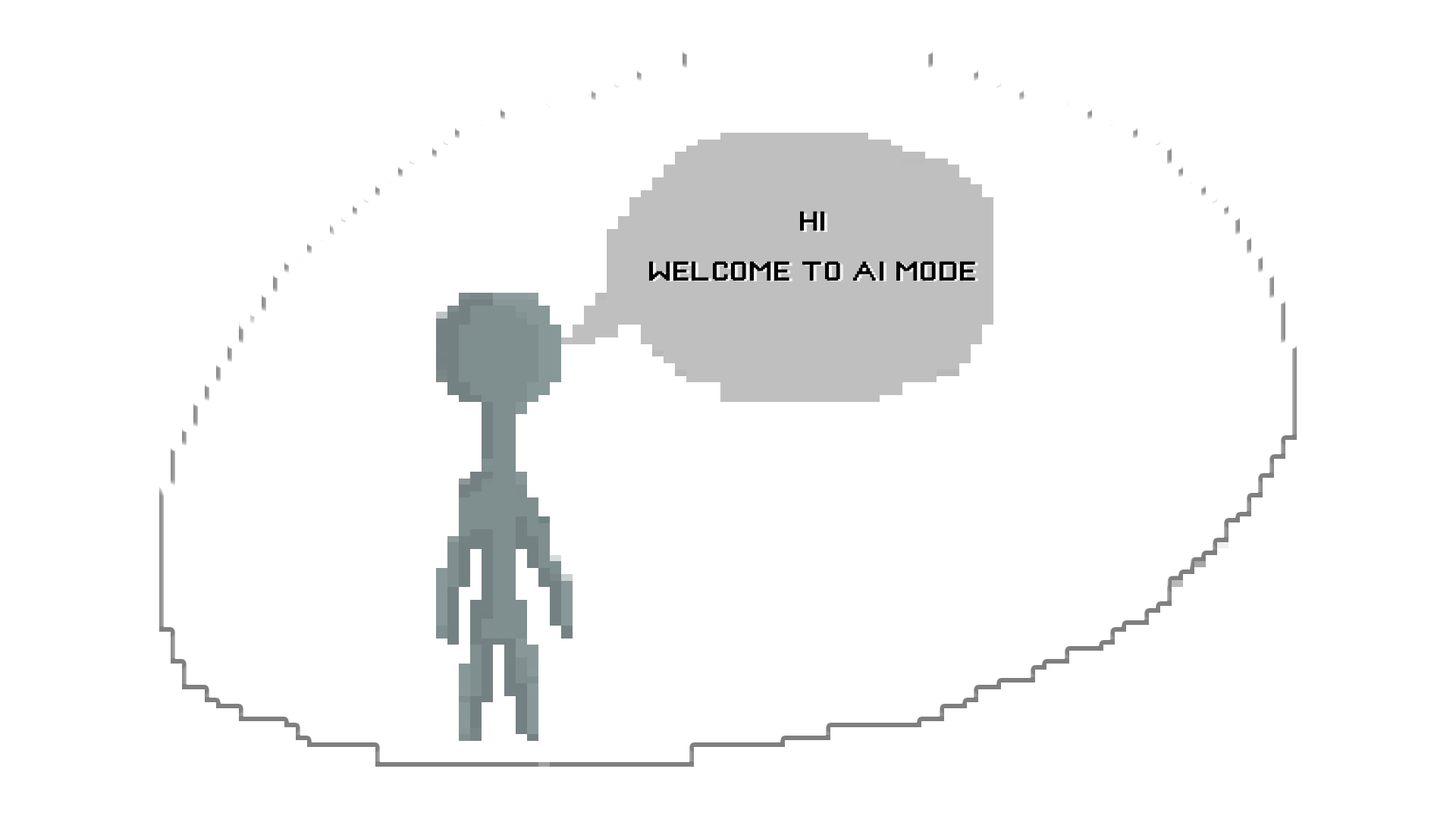
<style>
.page{position:relative;width:1456px;height:819px;background:#ffffff}
.page>*{position:absolute;margin:0}
.t1{font:25.3px/49.8px "PixelGameFont";color:#000000;text-transform:uppercase;scale:1.18 1}
</style>
<div class="page">
<p class="t1" style="left:649px;top:211px;width:326px;height:70px;text-align:center">hi<br>welcome to ai mode</p>
</div>
